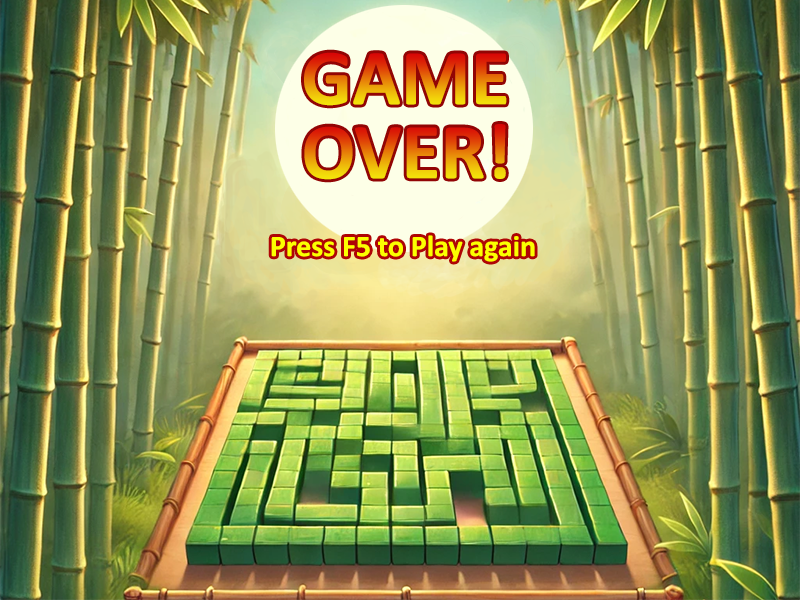
<style>
.page{position:relative;width:800px;height:600px}
.page>*{position:absolute;margin:0}
.t1{font:80px "Calibri-Bold"}
.t2{font:30px "Calibri-Bold";color:#fcff00}
</style>
<div class="page">
<p class="t1" style="left:304px;top:52px;width:203px;height:54px">GAME</p>
<p class="t1" style="left:304px;top:124px;width:202px;height:56px">OVER!</p>
<p class="t2" style="left:271px;top:235px;width:264px;height:27px">Press F5 to Play again</p>
</div>
